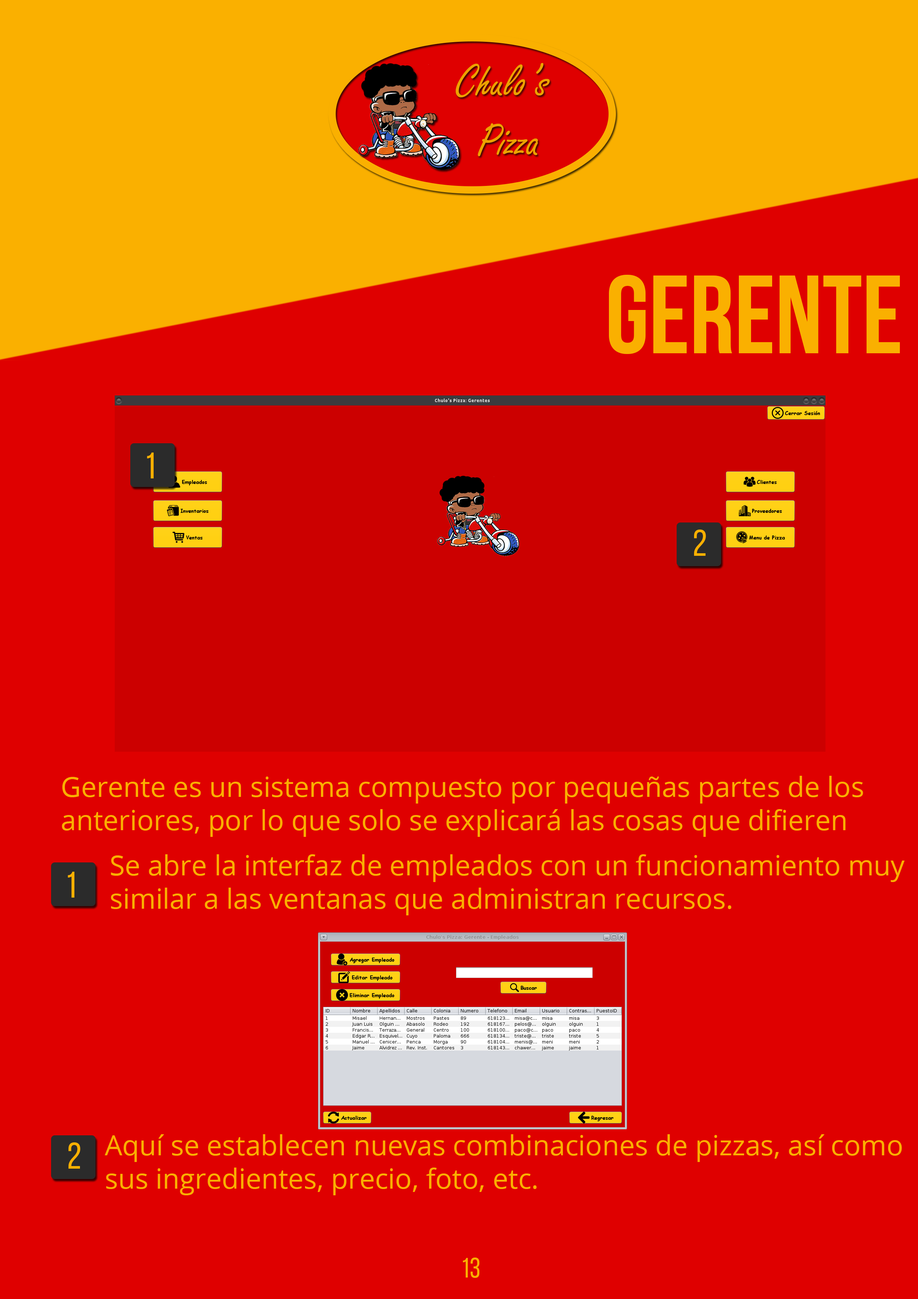
<style>
.page{position:relative;width:918px;height:1299px;background:#df0000}
.page>*{position:absolute;margin:0}
.t1{font:111.1px "BebasNeueBold";color:#fab000}
.t2{font:37px "BebasNeueRegular";color:#fab000}
.t3{font:27.8px "OpenSans";color:#fab000}
.t4{font:27.8px "BebasNeueRegular";color:#fab000}
</style>
<div class="page">
<p class="t1" style="left:609px;top:275px;width:291px;height:79px">GERENTE</p>
<p class="t2" style="left:147px;top:452px;width:7px;height:26px">1</p>
<p class="t2" style="left:694px;top:529px;width:12px;height:27px">2</p>
<p class="t3" style="left:62px;top:776px;width:801px;height:61px">Gerente es un sistema compuesto por pequeñas partes de los <br>anteriores, por lo que solo se explicará las cosas que difieren</p>
<p class="t3" style="left:111px;top:854px;width:794px;height:61px">Se abre la interfaz de empleados con un funcionamiento muy<br>similar a las ventanas que administran recursos.</p>
<p class="t2" style="left:68px;top:872px;width:6px;height:25px">1</p>
<p class="t3" style="left:105px;top:1134px;width:797px;height:61px">Aquí se establecen nuevas combinaciones de pizzas, así como<br>sus ingredientes, precio, foto, etc.</p>
<p class="t2" style="left:68px;top:1142px;width:12px;height:26px">2</p>
<p class="t4" style="left:463px;top:1257px;width:16px;height:21px">13</p>
</div>
